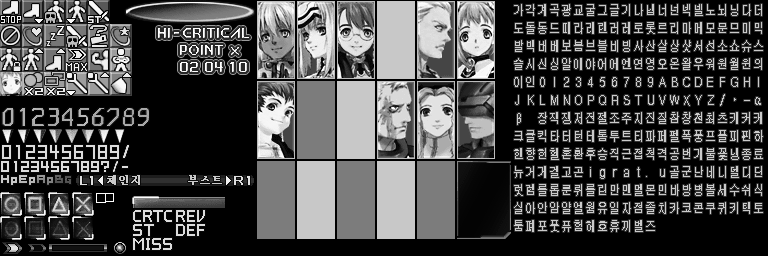
<style>
.page{position:relative;width:768px;height:256px;background:#000000}
.page>*{position:absolute;margin:0}
.t1{font:14px/18px "GulimChe";letter-spacing:0.09em;color:#cacaca;scale:0.8 1}
.t2{font:14px/18px "KozGoPr6N-Regular";letter-spacing:0.03em;color:#cacaca;scale:0.8 1}
.t3{font:14px/18px "GulimChe";letter-spacing:0.03em;color:#cacaca;scale:0.8 1}
.t4{font:11px "BatangChe";letter-spacing:-0.05em;color:#cacaca;font-weight:bold}
</style>
<div class="page">
<p class="t1" style="left:514px;top:4px;width:249px;height:228px">가각계곡광교굴그글기나냅너넌넥넬노뇌닝다더도돌동드때라래랜러레로롯르리마메모문므미믹발백버베보봄브블비빙사산살상샷서선소쇼슈스슬시신싱알애야어에엔연영오온왈우워원월윈의이인０１２３４５６７８９ＡＢＣＤＥＦＧＨＩＪＫＬＭＮＯＰＱＲＳＴＵＶＷＸＹＺ／<span class="t2">・</span><span class="t3">－</span>αβ　장잭쟁저전젤조주지진질참창천최츠캐커케<br>크클킥타터턴테톰투트티파페펠폭풍프플피핀하핸향헌헬혼환후승직근접척격공번개불꽃냉종료뉴거게겔고곤ｉｇｒａｔ．ｕ골군난네니델디딘<br>럿렘롤롭룬뤼를린만맨멜몬민바방병볼세수쉬식<br>실아안암얄엘웜유일자점졸치카코콘쿠퀴키택토툼폐포풋퓨험헤호휴끼벨즈</p>
<p class="t4" style="left:107px;top:175px;width:33px;height:10px">체인지</p>
<p class="t4" style="left:188px;top:175px;width:34px;height:10px">부스트</p>
</div>
